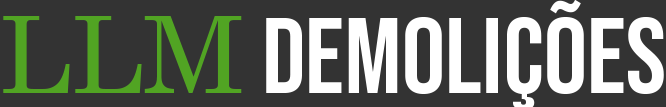
<style>
.page{position:relative;width:666px;height:107px;background:#333333}
.page>*{position:absolute;margin:0}
.t1{font:107.4px "BebasNeue-Regular";color:#ffffff}
.t2{font:107.4px "Century";color:#51a423}
</style>
<div class="page">
<p class="t1" style="left:3px;top:0px;width:661px;height:109px"><span class="t2">LLM </span>DEMOLIÇÕES</p>
</div>
